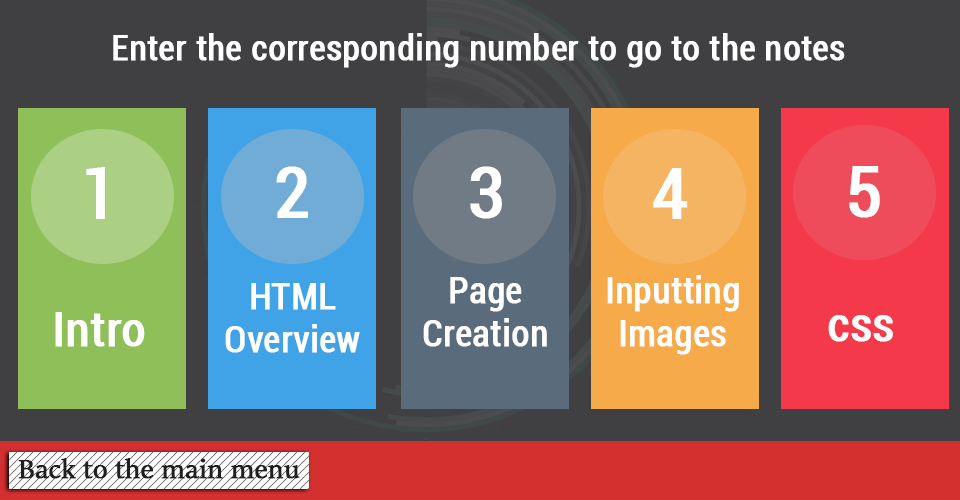
<style>
.page{position:relative;width:960px;height:500px;background:#404042}
.page>*{position:absolute;margin:0}
.t1{font:35px "Roboto-Condensed";color:#ffffff;font-weight:bold}
.t2{font:70px "Roboto-Condensed";color:#ffffff;font-weight:bold}
.t3{font:36px "Roboto-Condensed";color:#ffffff;font-weight:bold}
.t4{font:48px "Roboto-Condensed";color:#ffffff;font-weight:bold}
.t5{font:30px "SitkaBanner";color:#1f1f1f;font-weight:bold}
</style>
<div class="page">
<p class="t1" style="left:113px;top:33px;width:732px;height:35px">Enter the corresponding number to go to the notes</p>
<p class="t2" style="left:86px;top:167px;width:19px;height:52px">1</p>
<p class="t2" style="left:276px;top:166px;width:32px;height:52px">2</p>
<p class="t2" style="left:470px;top:166px;width:32px;height:53px">3</p>
<p class="t2" style="left:653px;top:168px;width:35px;height:51px">4</p>
<p class="t2" style="left:849px;top:166px;width:31px;height:52px">5</p>
<p class="t3" style="left:423px;top:277px;width:124px;height:70px;text-align:center">Page <br>Creation</p>
<p class="t3" style="left:607px;top:275px;width:132px;height:80px;text-align:center">Inputting Images</p>
<p class="t3" style="left:225px;top:283px;width:135px;height:70px;text-align:center">HTML<br>Overview</p>
<p class="t4" style="left:55px;top:312px;width:90px;height:35px">Intro</p>
<p class="t4" style="left:828px;top:315px;width:65px;height:27px">css</p>
<p class="t5" style="left:18px;top:458px;width:282px;height:21px">Back to the main menu</p>
</div>
